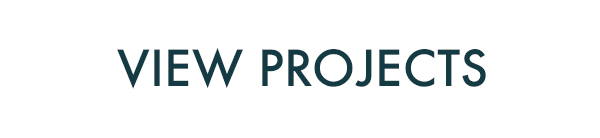
<style>
.page{position:relative;width:600px;height:138px;background:#ffffff}
.page>*{position:absolute;margin:0}
.t1{font:48.4px "Futura-Medium";color:#143a44;text-transform:uppercase}
</style>
<div class="page">
<p class="t1" style="left:117px;top:47px;width:369px;height:42px">View Projects</p>
</div>
